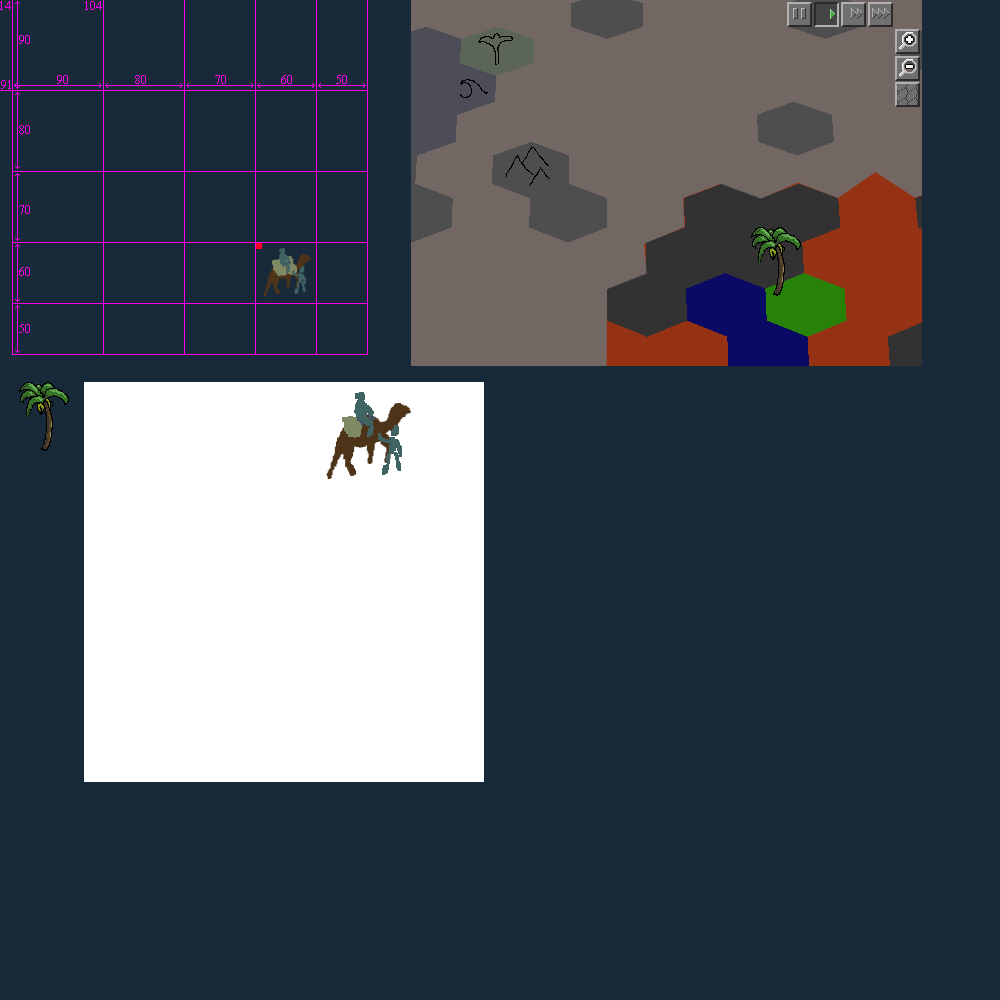
<style>
.page{position:relative;width:1000px;height:1000px;background:#182a3a}
.page>*{position:absolute;margin:0}
.t1{font:12px "TimesNewRomanPSMT";color:#ff00ea}
</style>
<div class="page">
<p class="t1" style="left:0px;top:1px;width:11px;height:9px">14</p>
<p class="t1" style="left:85px;top:1px;width:17px;height:9px">104</p>
<p class="t1" style="left:19px;top:35px;width:11px;height:9px">90</p>
<p class="t1" style="left:57px;top:75px;width:11px;height:9px">90</p>
<p class="t1" style="left:135px;top:75px;width:11px;height:9px">80</p>
<p class="t1" style="left:215px;top:75px;width:11px;height:9px">70</p>
<p class="t1" style="left:281px;top:75px;width:11px;height:9px">60</p>
<p class="t1" style="left:336px;top:75px;width:11px;height:9px">50</p>
<p class="t1" style="left:1px;top:80px;width:10px;height:9px">91</p>
<p class="t1" style="left:19px;top:125px;width:11px;height:9px">80</p>
<p class="t1" style="left:19px;top:205px;width:11px;height:9px">70</p>
<p class="t1" style="left:19px;top:267px;width:11px;height:9px">60</p>
<p class="t1" style="left:19px;top:324px;width:11px;height:9px">50</p>
</div>
